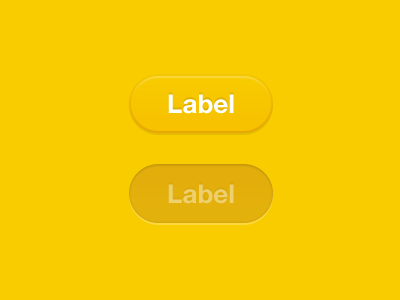
<style>
.page{position:relative;width:400px;height:300px;background:#f9cc00}
.page>*{position:absolute;margin:0}
.t1{font:26px "HelveticaNeue-Bold";color:#ffffff}
.t2{font:26px "HelveticaNeue-Bold";color:#ffffff;text-transform:uppercase}
.t3{font:26px "HelveticaNeue-Bold";color:#eecf6d}
.t4{font:26px "HelveticaNeue-Bold";color:#eecf6d;text-transform:uppercase}
</style>
<div class="page">
<p class="t1" style="left:168px;top:94px;width:66px;height:20px"><span class="t2">l</span>abel</p>
<p class="t3" style="left:168px;top:184px;width:66px;height:20px"><span class="t4">l</span>abel</p>
</div>
